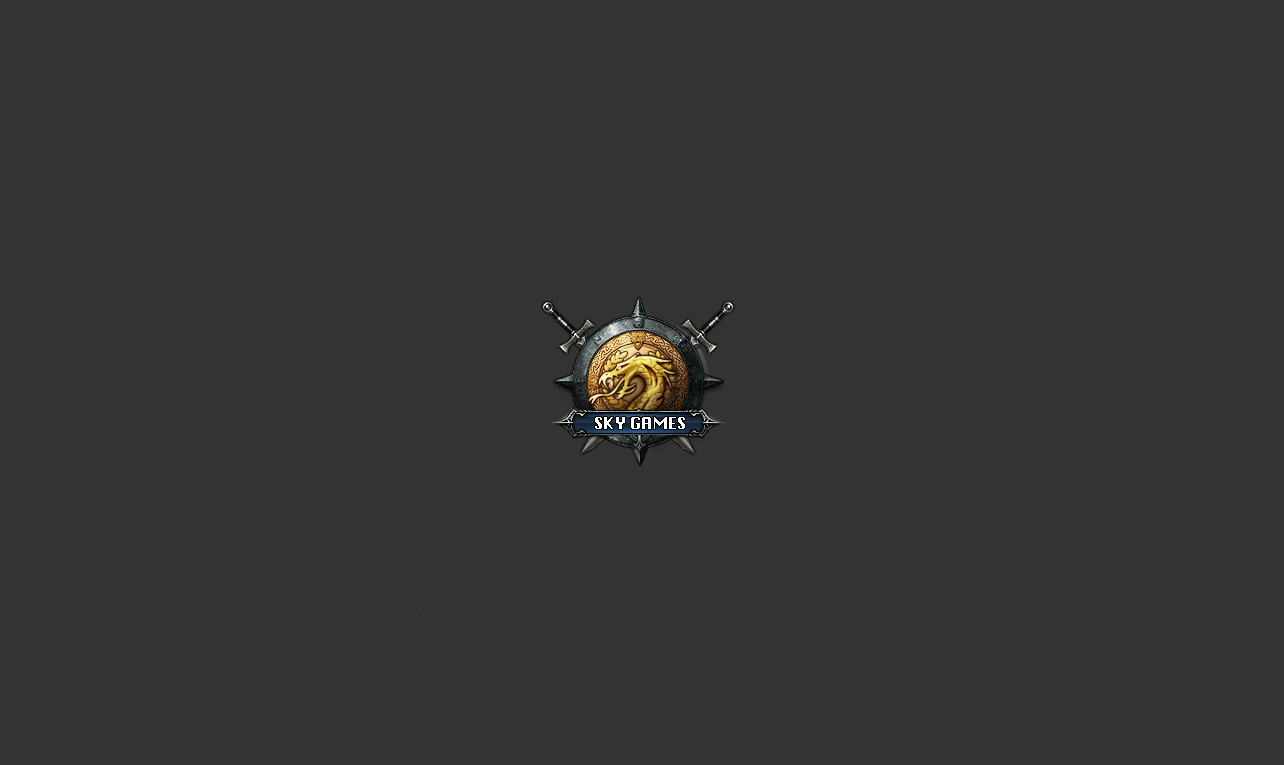
<style>
.page{position:relative;width:1284px;height:765px;background:#333333}
.page>*{position:absolute;margin:0}
.t1{font:16px "Krungthep";color:#ffffff}
</style>
<div class="page">
<p class="t1" style="left:595px;top:417px;width:90px;height:12px">SKY GAMES</p>
</div>
